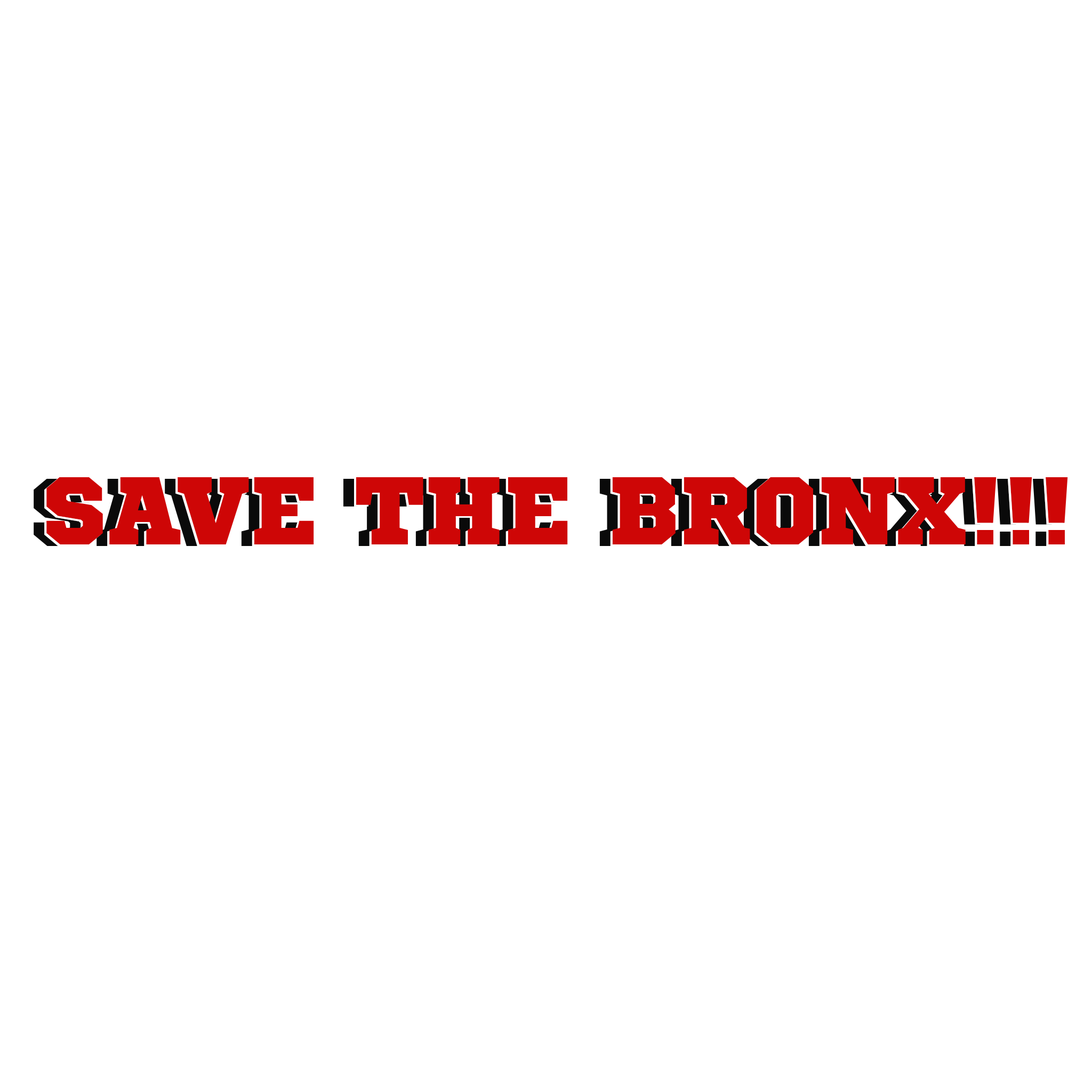
<style>
.page{position:relative;width:1092px;height:1092px;background:#ffffff}
.page>*{position:absolute;margin:0}
.t1{font:96px "SportsWorld"}
.t2{font:96px "SportsWorld";color:#ce0606}
</style>
<div class="page">
<p class="t1" style="left:34px;top:479px;width:1021px;height:67px">SAVE THE BRONX!!!</p>
<p class="t2" style="left:44px;top:479px;width:1022px;height:67px">SAVE THE BRONX!!!</p>
<p class="t2" style="left:46px;top:477px;width:1022px;height:67px">SAVE THE BRONX!!!</p>
</div>
